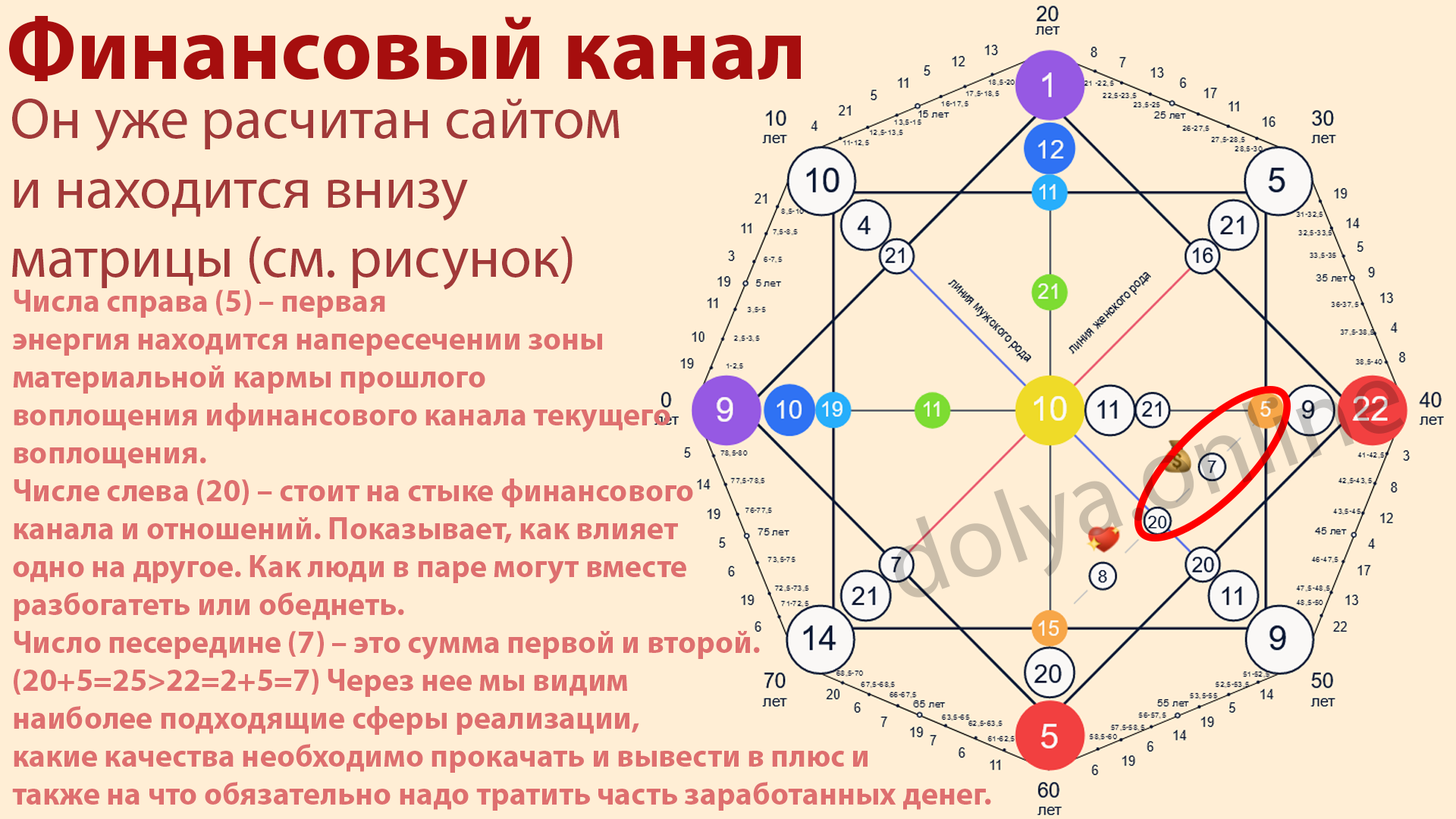
<style>
.page{position:relative;width:1456px;height:819px;background:#ffeed5}
.page>*{position:absolute;margin:0}
.t1{font:89.5px "MyriadPro-Bold";color:#a60e0e}
.t2{font:57.9px "MyriadPro-Regular";color:#a13939}
.t3{font:31.6px "MyriadPro-Bold";color:#de6f6f}
</style>
<div class="page">
<p class="t1" style="left:9px;top:16px;width:792px;height:65px">Финансовый канал</p>
<p class="t2" style="left:12px;top:99px;width:608px;height:191px">Он уже расчитан сайтом <br>и находится внизу<br>матрицы (см. рисунок)</p>
<p class="t3" style="left:12px;top:290px;width:979px;height:521px">Числа справа (5) – первая <br>энергия находится напересечении зоны <br>материальной кармы прошлого <br>воплощения ифинансового канала текущего <br>воплощения.<br>Числе слева (20) – стоит на стыке финансового <br>канала и отношений. Показывает, как влияет <br>одно на другое. Как люди в паре могут вместе<br>разбогатеть или обеднеть.<br>Число песередине (7) – это сумма первой и второй. <br>(20+5=25&gt;22=2+5=7) Через нее мы видим<br>наиболее подходящие сферы реализации, <br>какие качества необходимо прокачать и вывести в плюс и <br>также на что обязательно надо тратить часть заработанных денег.</p>
</div>
